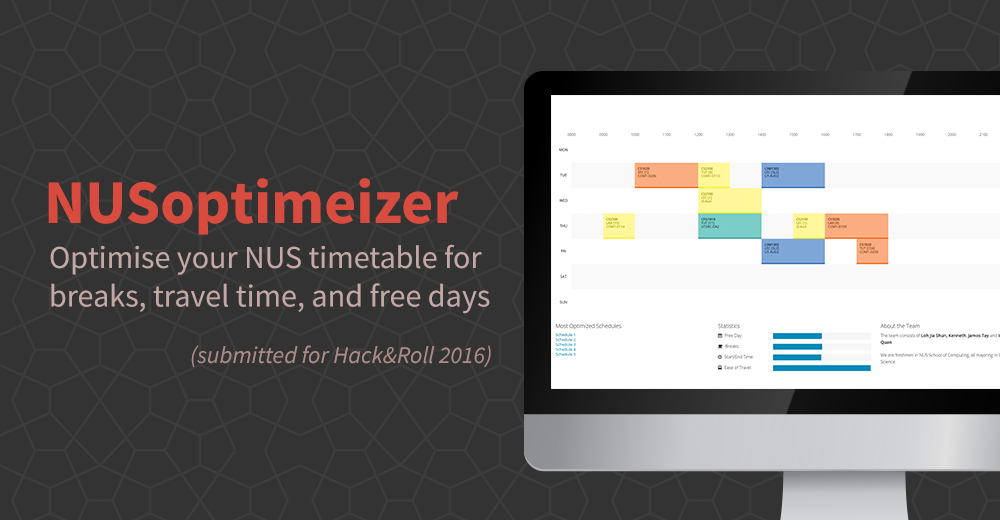
<style>
.page{position:relative;width:1000px;height:520px;background:#333333}
.page>*{position:absolute;margin:0}
.t1{font:62px "SourceSansPro-Bold";color:#d84c3f}
.t2{font:32px "SourceSansPro-Regular";color:#c4a8a5}
.t3{font:24px "SourceSansPro-It";color:#ac8c89}
</style>
<div class="page">
<p class="t1" style="left:48px;top:178px;width:411px;height:57px">NUSoptimeizer</p>
<p class="t2" style="left:50px;top:244px;width:440px;height:70px">Optimise your NUS timetable for <br>breaks, travel time, and free days</p>
<p class="t3" style="left:191px;top:345px;width:300px;height:23px">(submitted for Hack&amp;Roll 2016)</p>
</div>
